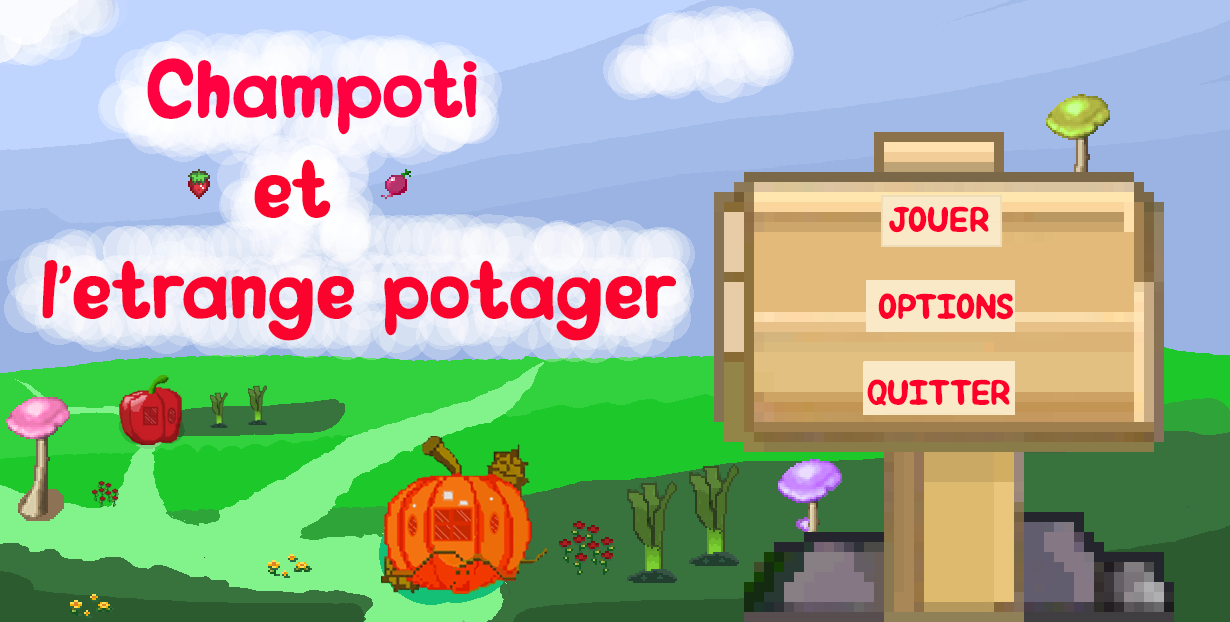
<style>
.page{position:relative;width:1230px;height:622px}
.page>*{position:absolute;margin:0}
.t1{font:84px "MagicMushroom";color:#fa042d}
.t2{font:84px "MagicMushroom";color:#1a1917}
.t3{font:84px "MagicMushroom";color:#ff0040}
.t4{font:36px "MagicMushroom";color:#ff002a}
</style>
<div class="page">
<p class="t1" style="left:42px;top:58px;width:634px;height:283px"><span class="t2">    </span><span class="t3">Champoti</span> <br>        et <br>l’étrange potager</p>
<p class="t4" style="left:867px;top:206px;width:146px;height:200px">JOUER <br><br> OPTIONS<br><br>QUITTER</p>
</div>
